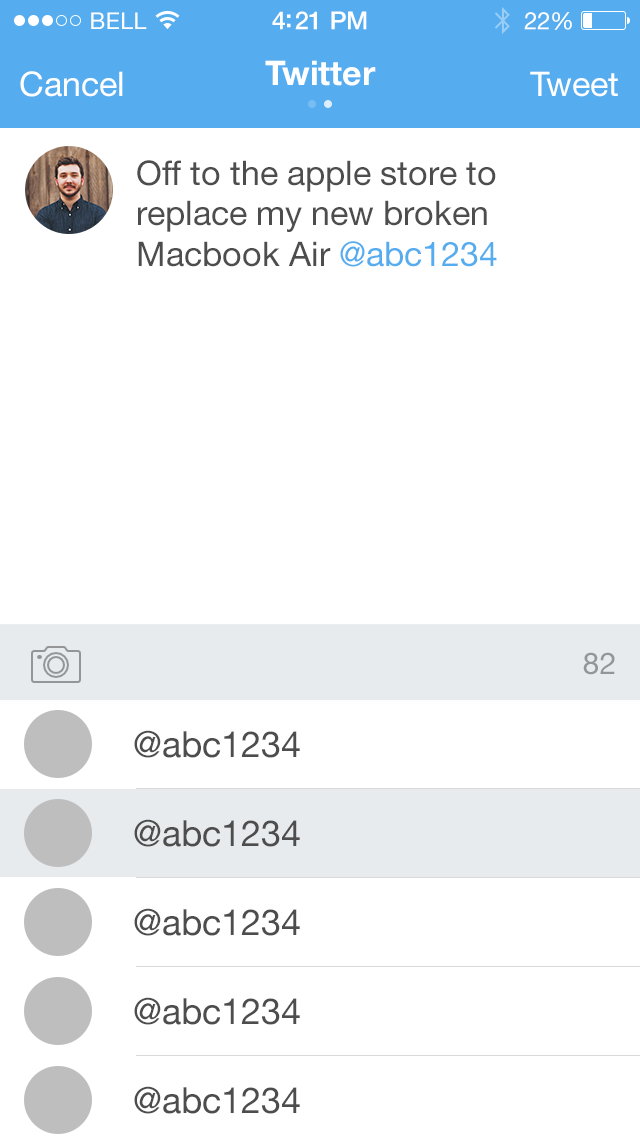
<style>
.page{position:relative;width:640px;height:1136px;background:#ffffff}
.page>*{position:absolute;margin:0}
.t1{font:23px "HelveticaNeue";letter-spacing:0.02em;color:#ffffff}
.t2{font:25px "HelveticaNeue-Medium";letter-spacing:-0.02em;color:#ffffff}
.t3{font:24px "HelveticaNeue";letter-spacing:-0.02em;color:#ffffff}
.t4{font:34px "HelveticaNeue-Bold";color:#ffffff}
.t5{font:34px "HelveticaNeue";color:#ffffff}
.t6{font:34px "HelveticaNeue";color:#4d4d4d}
.t7{font:34px "HelveticaNeue";color:#55acee}
.t8{font:30px "HelveticaNeue";color:#939597}
.t9{font:36px "HelveticaNeue";color:#4d4d4d}
</style>
<div class="page">
<p class="t1" style="left:91px;top:12px;width:56px;height:17px">BELL</p>
<p class="t2" style="left:272px;top:11px;width:95px;height:19px">4:21 PM</p>
<p class="t3" style="left:524px;top:12px;width:48px;height:18px">22%</p>
<p class="t4" style="left:265px;top:60px;width:111px;height:26px">Twitter</p>
<p class="t5" style="left:20px;top:71px;width:103px;height:26px">Cancel</p>
<p class="t5" style="left:530px;top:71px;width:88px;height:26px">Tweet</p>
<p class="t6" style="left:137px;top:160px;width:360px;height:107px">Off to the apple store to<br>replace my new broken<br>Macbook Air <span class="t7">@abc1234</span></p>
<p class="t8" style="left:583px;top:652px;width:32px;height:23px">82</p>
<p class="t9" style="left:134px;top:730px;width:166px;height:28px">@abc1234</p>
<p class="t9" style="left:134px;top:819px;width:166px;height:28px">@abc1234</p>
<p class="t9" style="left:134px;top:908px;width:166px;height:28px">@abc1234</p>
<p class="t9" style="left:134px;top:997px;width:166px;height:28px">@abc1234</p>
<p class="t9" style="left:134px;top:1086px;width:166px;height:28px">@abc1234</p>
</div>
